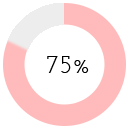
<style>
.page{position:relative;width:128px;height:128px;background:#ffffff}
.page>*{position:absolute;margin:0}
.t1{font:25px "JosefinSlab";color:#000000}
</style>
<div class="page">
<p class="t1" style="left:47px;top:56px;width:42px;height:17px">75%</p>
</div>
